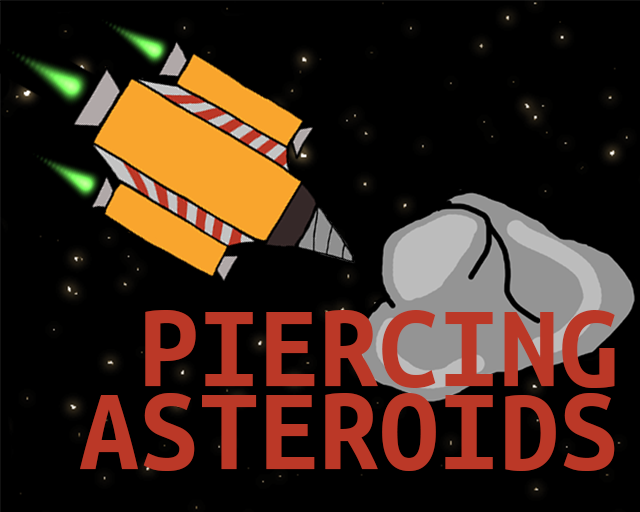
<style>
.page{position:relative;width:640px;height:512px;background:#000000}
.page>*{position:absolute;margin:0}
.t1{font:120px "UbuntuMono-Bold";color:#bb3827}
</style>
<div class="page">
<p class="t1" style="left:145px;top:310px;width:470px;height:78px">PIERCING</p>
<p class="t1" style="left:80px;top:393px;width:535px;height:78px">ASTEROIDS</p>
</div>
